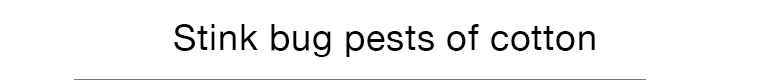
<style>
.page{position:relative;width:768px;height:80px;background:#ffffff}
.page>*{position:absolute;margin:0}
.t1{font:36px "HelveticaNeue";letter-spacing:0.02em;color:#000000}
</style>
<div class="page">
<p class="t1" style="left:174px;top:24px;width:421px;height:33px">Stink bug pests of cotton</p>
</div>
